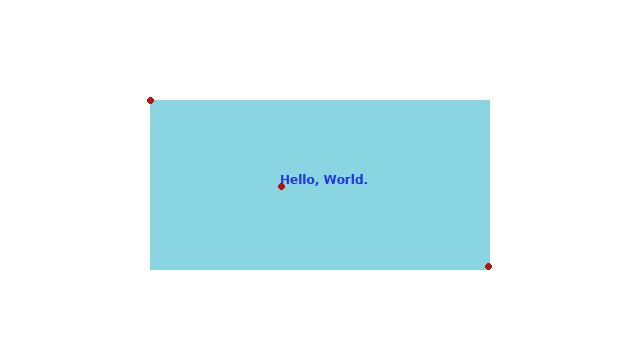
<style>
.page{position:relative;width:640px;height:360px;background:#ffffff}
.page>*{position:absolute;margin:0}
.t1{font:12px "DejaVuSans-Bold";color:#2138e2}
</style>
<div class="page">
<p class="t1" style="left:281px;top:174px;width:86px;height:12px">Hello, World.</p>
</div>
